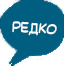
<style>
.page{position:relative;width:64px;height:66px;background:#005e80}
.page>*{position:absolute;margin:0}
.t1{font:16px "SuplexmentaryComicNC";color:#ffffff;scale:0.8 1}
</style>
<div class="page">
<p class="t1" style="left:12px;top:21px;width:45px;height:15px;rotate:3deg">РЕДКО</p>
</div>
